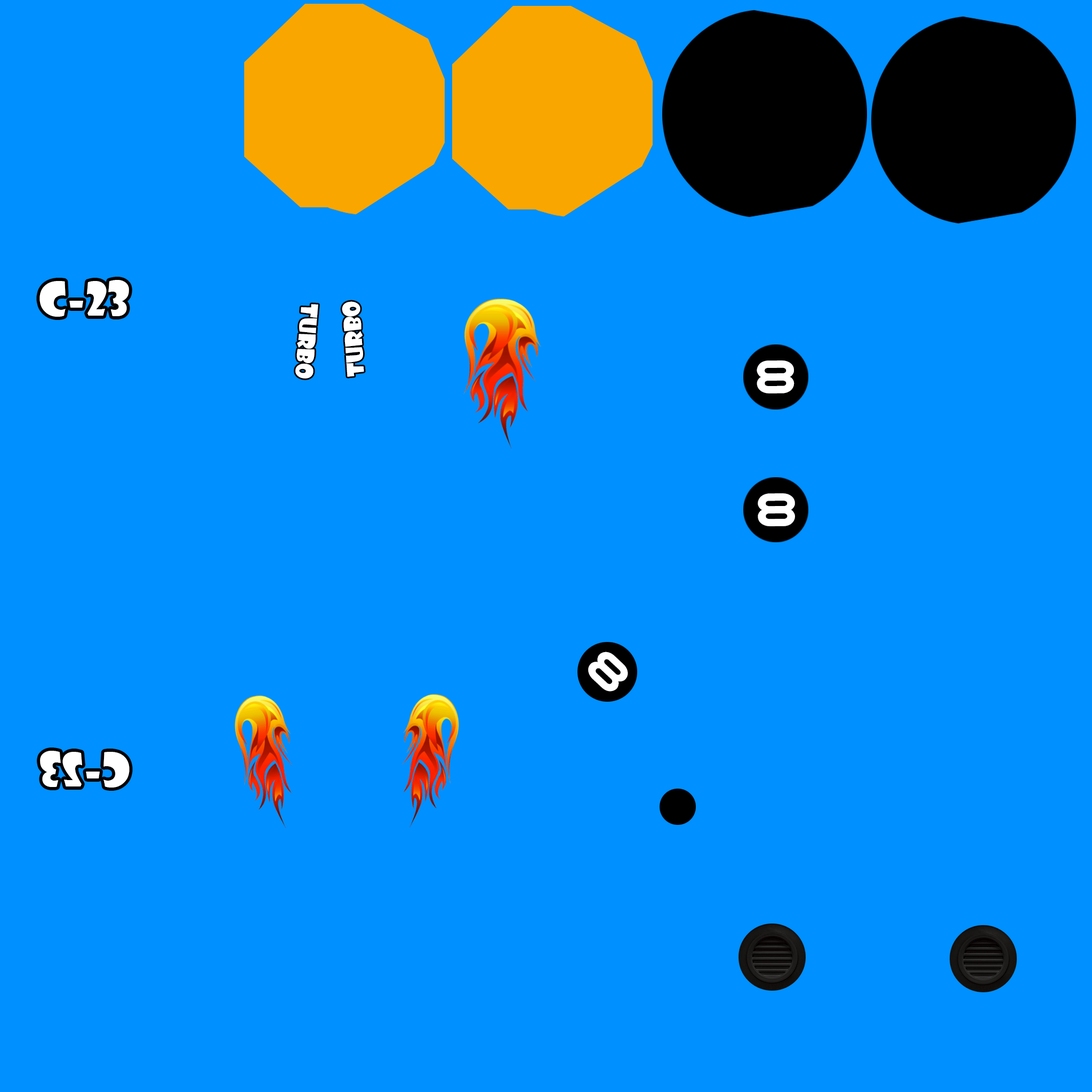
<style>
.page{position:relative;width:1092px;height:1092px;background:#0090ff}
.page>*{position:absolute;margin:0}
.t1{font:46px "ShowcardGothic-Reg";color:#ffffff;font-variant:small-caps}
.t2{font:32px "ShowcardGothic-Reg";color:#ffffff;font-variant:small-caps}
.t3{font:45.4px "SuiGeneris";color:#ffffff;font-variant:small-caps}
.t4{font:43.9px "SuiGeneris";color:#ffffff;font-variant:small-caps}
</style>
<div class="page">
<p class="t1" style="left:39px;top:280px;width:90px;height:37px">C-23</p>
<p class="t2" style="left:295px;top:304px;width:23px;height:75px;rotate:95deg">turbo</p>
<p class="t2" style="left:342px;top:301px;width:22px;height:76px;rotate:-94deg">turbo</p>
<p class="t3" style="left:757px;top:360px;width:37px;height:33px;rotate:180deg">8</p>
<p class="t3" style="left:758px;top:493px;width:37px;height:33px">8</p>
<p class="t4" style="left:588px;top:652px;width:40px;height:40px;rotate:43deg">8</p>
<p class="t1" style="left:40px;top:751px;width:90px;height:37px;rotate:180deg">C-23</p>
</div>
